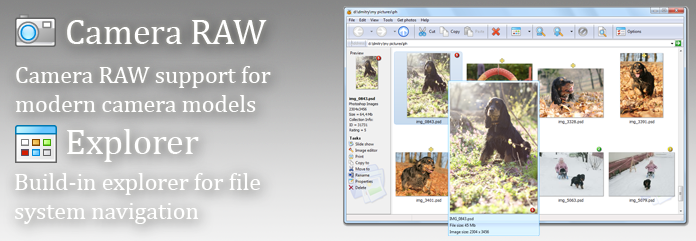
<style>
.page{position:relative;width:696px;height:241px}
.page>*{position:absolute;margin:0}
.t1{font:36px "CambriaMath";color:#ffffff}
.t2{font:24px "CambriaMath";color:#ffffff}
</style>
<div class="page">
<p class="t1" style="left:67px;top:20px;width:200px;height:24px">Camera RAW</p>
<p class="t2" style="left:15px;top:66px;width:256px;height:46px">Camera RAW support for modern camera models</p>
<p class="t1" style="left:67px;top:129px;width:132px;height:33px">Explorer</p>
<p class="t2" style="left:15px;top:173px;width:246px;height:51px">Build-in explorer for file system navigation</p>
</div>
